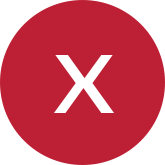
<style>
.page{position:relative;width:165px;height:165px;background:#bd1f35}
.page>*{position:absolute;margin:0}
.t1{font:83.1px "BebasNeueRegular";color:#ffffff;scale:1.86 1}
</style>
<div class="page">
<p class="t1" style="left:54px;top:55px;width:60px;height:58px">x</p>
</div>
